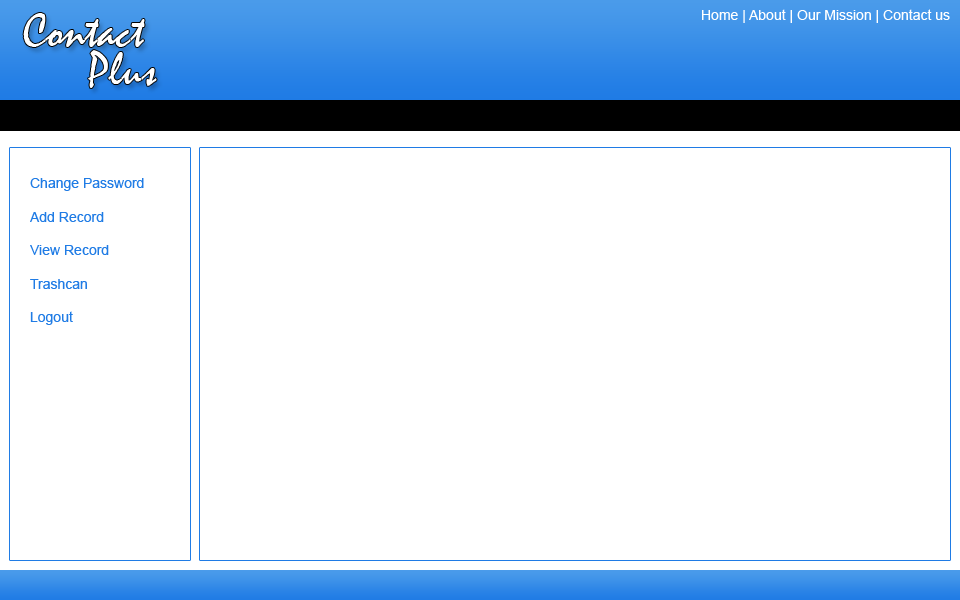
<style>
.page{position:relative;width:960px;height:600px;background:#ffffff}
.page>*{position:absolute;margin:0}
.t1{font:48px "Mistral";color:#ffffff}
.t2{font:14px "ArialMT";color:#ffffff}
.t3{font:14px "ArialMT";color:#207ce5}
</style>
<div class="page">
<p class="t1" style="left:23px;top:13px;width:122px;height:34px">Contact</p>
<p class="t2" style="left:702px;top:9px;width:248px;height:14px">Home | About | Our Mission | Contact us</p>
<p class="t1" style="left:88px;top:50px;width:69px;height:38px">Plus</p>
<p class="t3" style="left:30px;top:178px;width:114px;height:147px">Change Password<br><br>Add Record<br><br>View Record<br><br>Trashcan<br><br>Logout</p>
</div>
